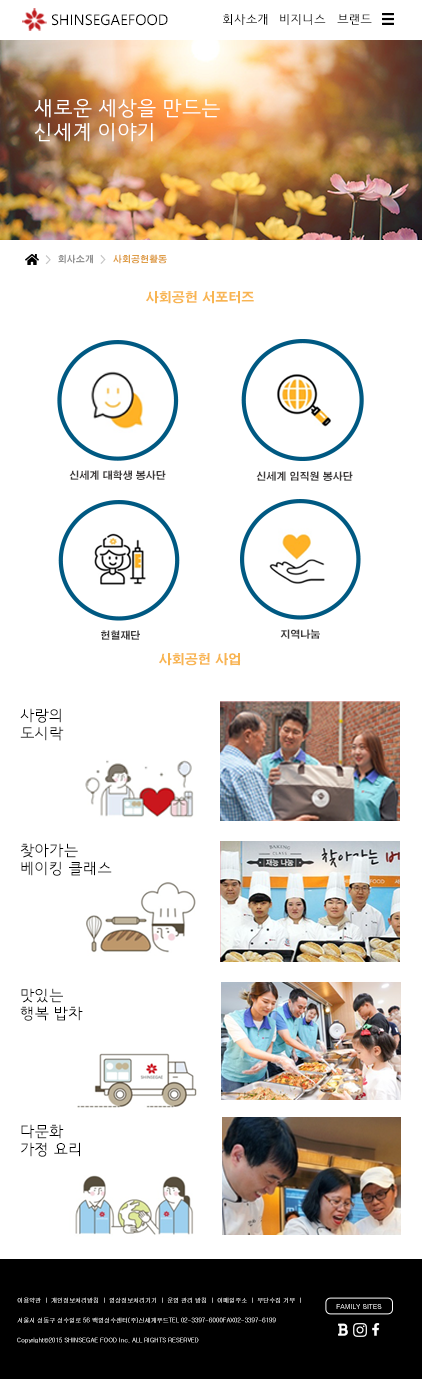
<style>
.page{position:relative;width:422px;height:1379px;background:#ffffff}
.page>*{position:absolute;margin:0}
.t1{font:15px "SegoeUISymbol";color:#000000}
.t2{font:12px "HCRDotum";color:#000000}
.t3{font:12px "HCRDotum"}
.t4{font:20px "HCRDotum";color:#ffffff}
.t5{font:12px "H2gtrE";color:#c5c5c5}
.t6{font:9px "H2gtrE";color:#929292}
.t7{font:9px "H2gtrE";color:#df9e46}
.t8{font:13px "H2gtrE";color:#f8b551}
.t9{font:10px "H2gtrE";color:#3e3c3c}
.t10{font:15px "HCRDotum";color:#000000}
.t11{font:6px/20px "Gulim"}
.t12{font:6.9px "Gulim"}
</style>
<div class="page">
<p class="t1" style="left:52px;top:14px;width:116px;height:12px">SHINSEGAEFOOD</p>
<p class="t2" style="left:223px;top:14px;width:45px;height:11px">회사소개</p>
<p class="t3" style="left:280px;top:14px;width:46px;height:11px">비지니스</p>
<p class="t2" style="left:337px;top:14px;width:35px;height:11px">브랜드</p>
<p class="t4" style="left:34px;top:99px;width:186px;height:43px">새로운 세상을 만드는<br>신세계 이야기</p>
<p class="t5" style="left:45px;top:255px;width:6px;height:10px">&gt;</p>
<p class="t6" style="left:58px;top:254px;width:35px;height:10px">회사소개</p>
<p class="t5" style="left:100px;top:254px;width:6px;height:10px">&gt;</p>
<p class="t7" style="left:113px;top:254px;width:54px;height:10px">사회공헌활동</p>
<p class="t8" style="left:146px;top:291px;width:108px;height:13px">사회공헌 서포터즈</p>
<p class="t9" style="left:69px;top:470px;width:97px;height:10px">신세계 대학생 봉사단</p>
<p class="t9" style="left:256px;top:471px;width:97px;height:10px">신세계 임직원 봉사단</p>
<p class="t9" style="left:101px;top:630px;width:39px;height:10px">헌혈재단</p>
<p class="t9" style="left:280px;top:629px;width:40px;height:10px">지역나눔</p>
<p class="t8" style="left:159px;top:653px;width:82px;height:13px">사회공헌 사업</p>
<p class="t10" style="left:20px;top:708px;width:44px;height:33px">사랑의<br>도시락</p>
<p class="t10" style="left:20px;top:843px;width:92px;height:33px">찾아가는<br>베이킹 클래스</p>
<p class="t10" style="left:20px;top:988px;width:63px;height:33px">맛있는<br>행복 밥차</p>
<p class="t10" style="left:21px;top:1124px;width:59px;height:33px">다문화<br>가정 요리</p>
<p class="t11" style="left:17px;top:1297px;width:284px;height:47px">이용약관 ㅣ 개인정보처리방침 ㅣ 영상정보처리기기 ㅣ 운영 관리 방침 ㅣ 이메일주소 ㅣ 무단수집 거부 ㅣ <br>서울시 성동구 성수일로 56 백영성수센터(주)신세계푸드TEL 02-3397-6000FAX02-3397-6199<br>Copyright©2015 SHINSEGAE FOOD Inc. ALL RIGHTS RESERVED</p>
<p class="t12" style="left:336px;top:1304px;width:46px;height:5px">FAMILY SITES</p>
</div>
